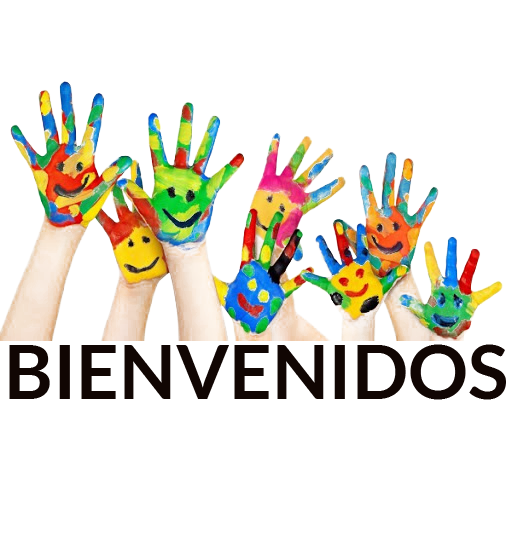
<style>
.page{position:relative;width:512px;height:549px;background:#ffffff}
.page>*{position:absolute;margin:0}
.t1{font:74.9px "Lato-Bold";color:#110603}
</style>
<div class="page">
<p class="t1" style="left:9px;top:344px;width:497px;height:56px">BIENVENIDOS</p>
</div>
